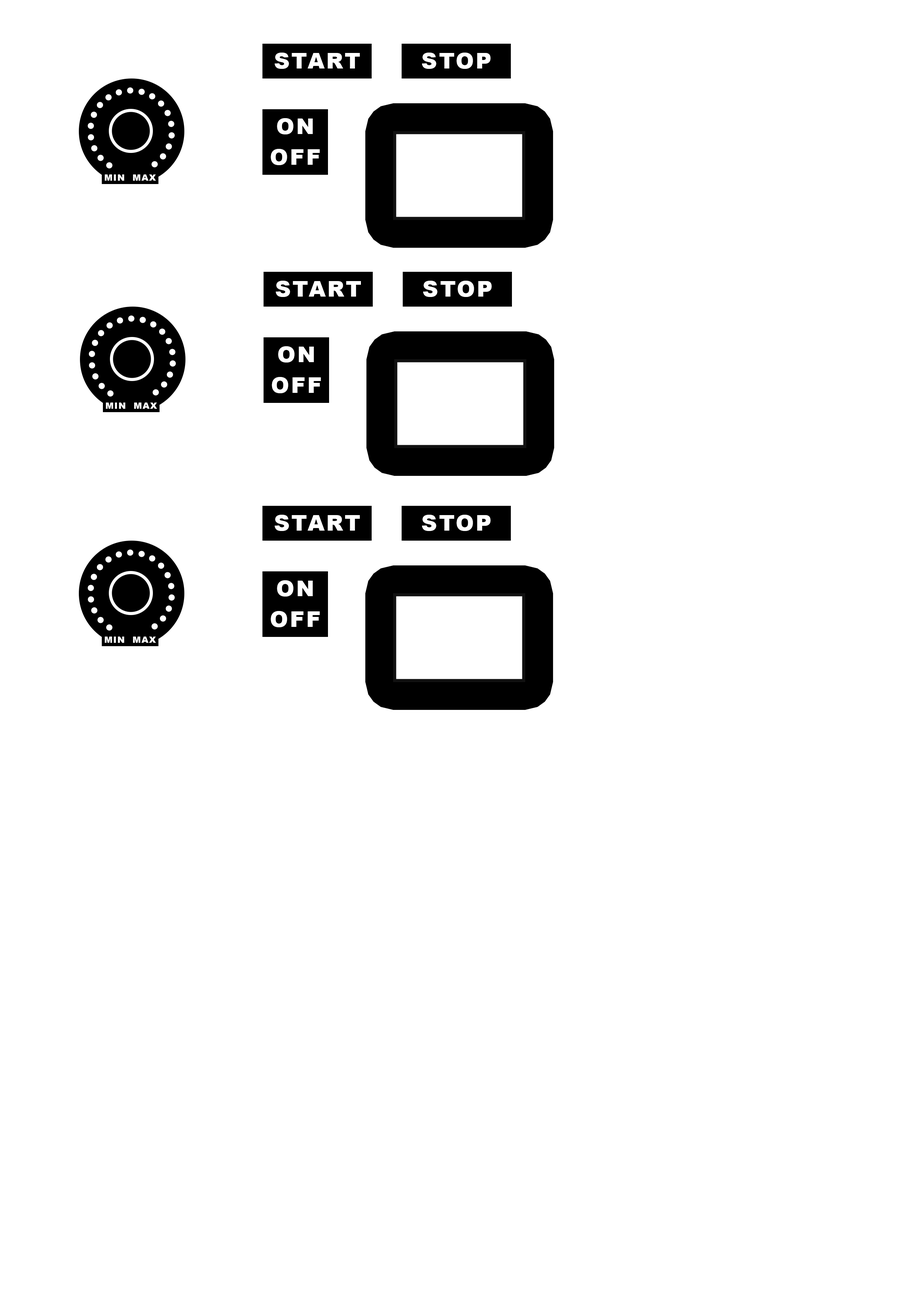
<style>
.page{position:relative;width:918px;height:1299px;background:#ffffff}
.page>*{position:absolute;margin:0}
.t1{font:21.9px "Arial-Black";letter-spacing:0.08em;color:#ffffff}
.t2{font:21.9px/30.6px "Arial-Black";letter-spacing:0.08em;color:#ffffff}
.t3{font:8.7px "Arial-Black";letter-spacing:0.08em;color:#ffffff}
</style>
<div class="page">
<p class="t1" style="left:275px;top:53px;width:85px;height:16px">START</p>
<p class="t1" style="left:422px;top:53px;width:69px;height:16px">STOP</p>
<p class="t2" style="left:271px;top:118px;width:49px;height:47px;text-align:center">ON<br>OFF</p>
<p class="t3" style="left:105px;top:174px;width:51px;height:7px">MIN  MAX</p>
</div>
